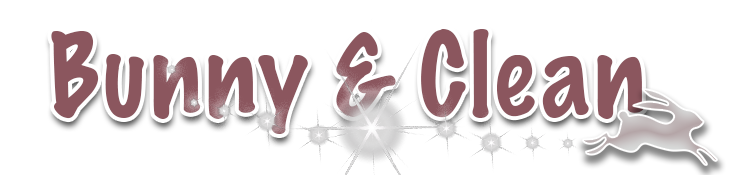
<style>
.page{position:relative;width:740px;height:175px;background:#ffffff}
.page>*{position:absolute;margin:0}
.t1{font:104.2px "MarkerFelt-Thin";color:#8b565e}
</style>
<div class="page">
<p class="t1" style="left:51px;top:29px;width:594px;height:105px">Bunny &amp; Clean</p>
</div>
